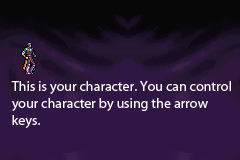
<style>
.page{position:relative;width:240px;height:160px;background:#301644}
.page>*{position:absolute;margin:0}
.t1{font:14px "MyriadPro-Regular";color:#fefcfc}
</style>
<div class="page">
<p class="t1" style="left:11px;top:81px;width:220px;height:47px">This is your character. You can control your character by using the arrow keys.</p>
</div>
